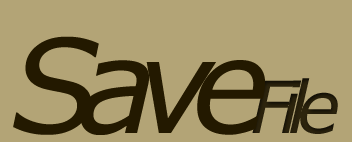
<style>
.page{position:relative;width:352px;height:142px;background:#b3a476}
.page>*{position:absolute;margin:0}
.t1{font:130px "Verdana-Italic";letter-spacing:-0.159em;color:#231900}
.t2{font:72px "Verdana-Italic";letter-spacing:-0.159em;color:#2e250d}
</style>
<div class="page">
<p class="t1" style="left:13px;top:36px;width:252px;height:99px">Save</p>
<p class="t2" style="left:252px;top:78px;width:86px;height:56px">File</p>
</div>
